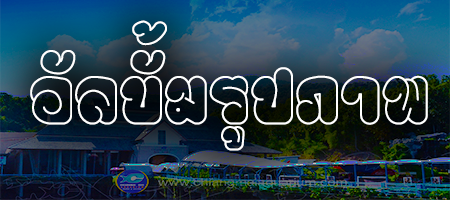
<style>
.page{position:relative;width:450px;height:200px}
.page>*{position:absolute;margin:0}
.t1{font:103.7px "SOV_moton";color:#ffffff}
</style>
<div class="page">
<p class="t1" style="left:30px;top:20px;width:398px;height:131px">อัลบั้มรูปภาพ</p>
</div>
